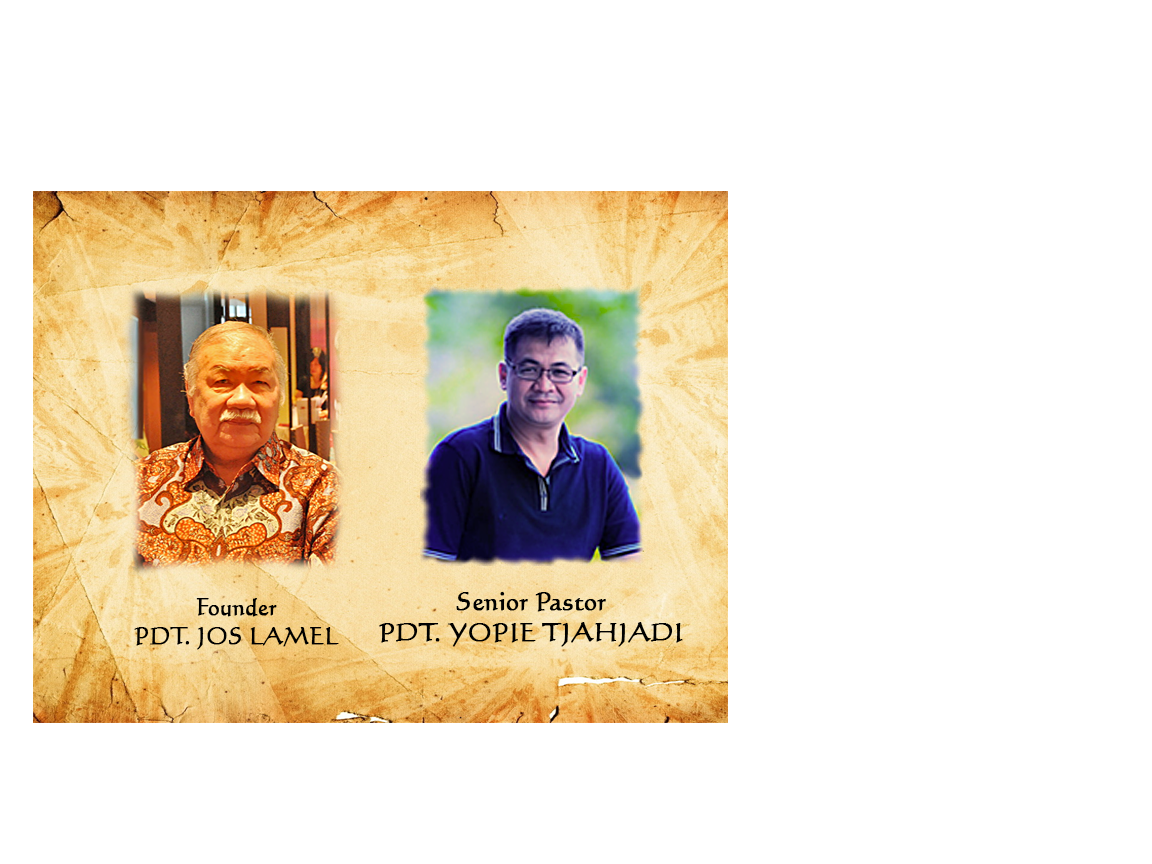
<style>
.page{position:relative;width:1152px;height:864px;background:#ffffff}
.page>*{position:absolute;margin:0}
.t1{font:25.5px "Calligraphic421BT-RomanB";color:#000000;font-weight:bold}
.t2{font:23.5px "Calligraphic421BT-RomanB";color:#000000;font-weight:bold}
</style>
<div class="page">
<p class="t1" style="left:379px;top:592px;width:304px;height:55px;text-align:center">Senior Pastor<br>PDT. YOPIE TJAHJADI</p>
<p class="t2" style="left:134px;top:598px;width:205px;height:52px;text-align:center">Founder<br>PDT. JOS LAMEL</p>
</div>
